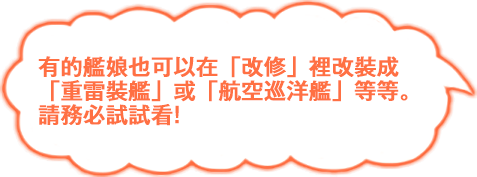
<style>
.page{position:relative;width:477px;height:177px;background:#ffffff}
.page>*{position:absolute;margin:0}
.t1{font:22px/24px "GothicMB101Pr6N-Medium";color:#ff7043;font-weight:bold}
</style>
<div class="page">
<p class="t1" style="left:38px;top:56px;width:370px;height:70px">有的艦娘也可以在「改修」裡改裝成<br>「重雷裝艦」或「航空巡洋艦」等等。<br>請務必試試看!</p>
</div>
